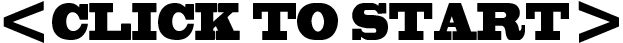
<style>
.page{position:relative;width:623px;height:43px;background:#ffffff}
.page>*{position:absolute;margin:0}
.t1{font:72px "BlackoakStd";color:#000000}
.t2{font:48.8px "BlackoakStd";color:#000000;scale:0.49 1}
</style>
<div class="page">
<p class="t1" style="left:3px;top:1px;width:41px;height:42px">&lt;</p>
<p class="t2" style="left:52px;top:3px;width:517px;height:37px">CLICK TO START</p>
<p class="t1" style="left:578px;top:1px;width:41px;height:42px">&gt;</p>
</div>
